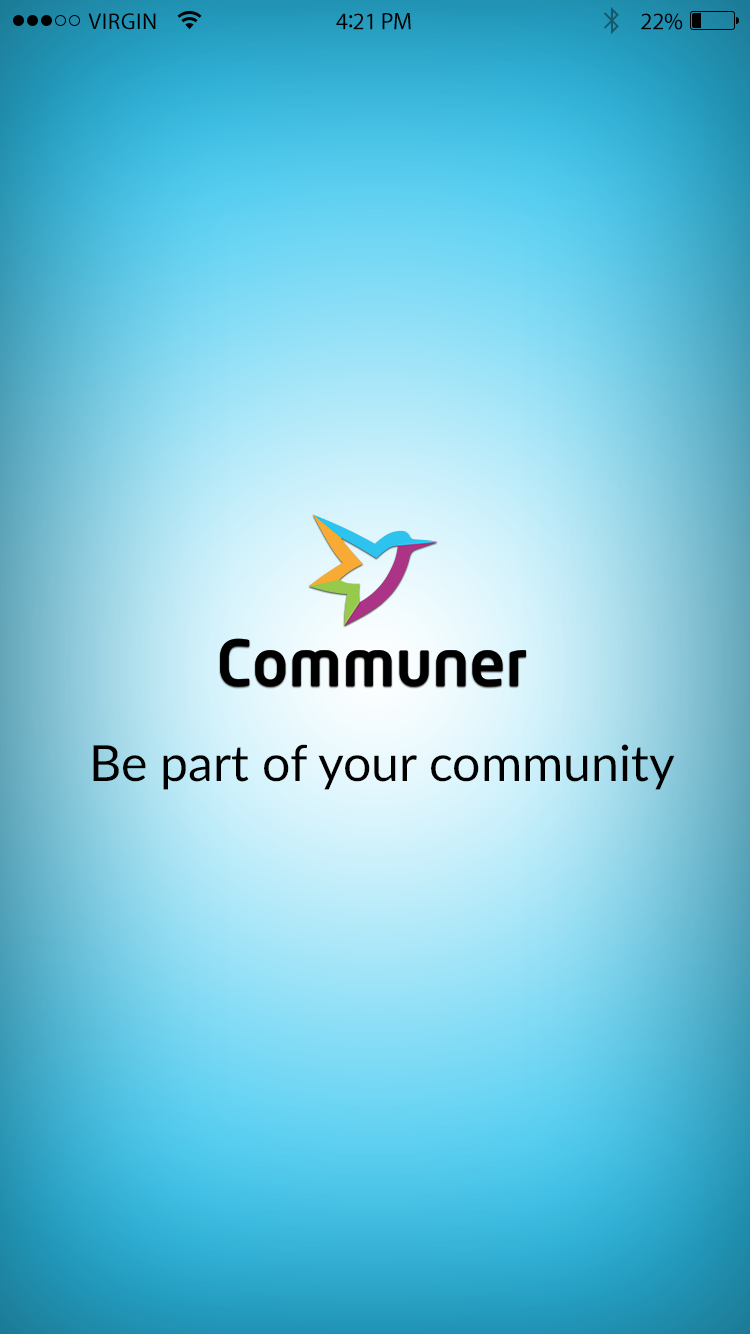
<style>
.page{position:relative;width:750px;height:1334px}
.page>*{position:absolute;margin:0}
.t1{font:23px "MyriadPro-Regular";letter-spacing:0.02em;color:#000000}
.t2{font:24px "MyriadPro-Regular";letter-spacing:-0.02em;color:#000000}
.t3{font:26px "MyriadPro-Regular";letter-spacing:-0.02em;color:#000000}
.t4{font:50px "Lato-Regular";color:#000000}
</style>
<div class="page">
<p class="t1" style="left:88px;top:13px;width:68px;height:17px">VIRGIN</p>
<p class="t2" style="left:336px;top:13px;width:75px;height:17px">4<span class="t3">:</span>21 PM</p>
<p class="t2" style="left:641px;top:13px;width:42px;height:17px">22%</p>
<p class="t4" style="left:93px;top:744px;width:582px;height:46px">Be part of your community</p>
</div>
